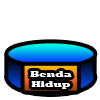
<style>
.page{position:relative;width:100px;height:100px;background:#ffffff}
.page>*{position:absolute;margin:0}
.t1{font:8.2px "Rockwell-ExtraBold";color:#ffffff;scale:1.28 1}
</style>
<div class="page">
<p class="t1" style="left:30px;top:71px;width:42px;height:18px;text-align:center">Benda<br>Hidup</p>
</div>
